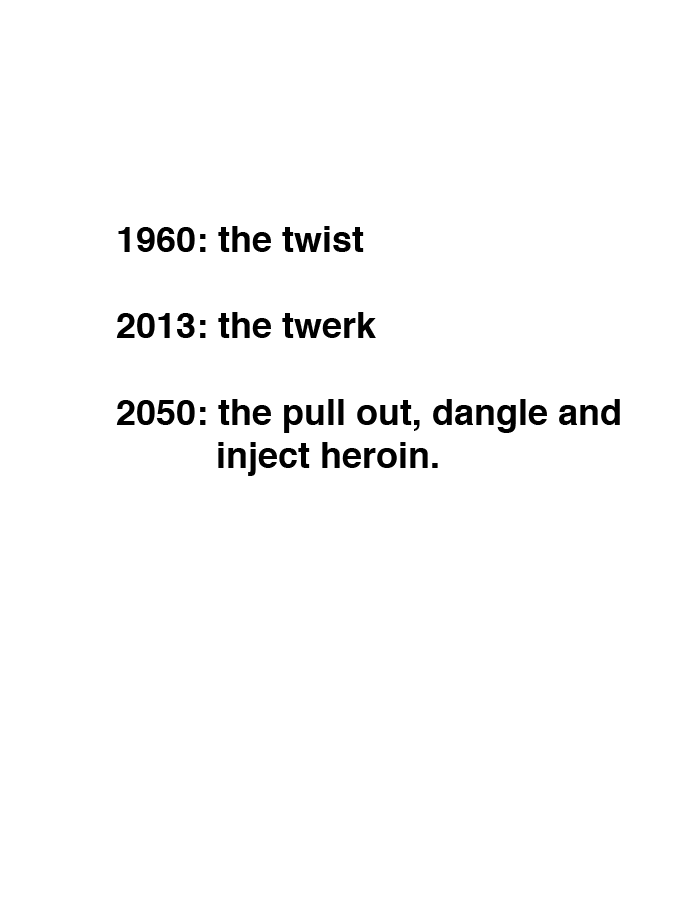
<style>
.page{position:relative;width:700px;height:900px;background:#ffffff}
.page>*{position:absolute;margin:0}
.t1{font:36px "Helvetica-Bold";color:#000000}
</style>
<div class="page">
<p class="t1" style="left:116px;top:226px;width:504px;height:250px">1960: the twist<br><br>2013: the twerk<br><br>2050: the pull out, dangle and<br>          inject heroin.</p>
</div>
